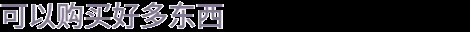
<style>
.page{position:relative;width:470px;height:32px;background:#000000}
.page>*{position:absolute;margin:0}
.t1{font:28px "WebPSD-18463539-0-Regular";color:#837a91;font-weight:bold}
</style>
<div class="page">
<p class="t1" style="left:0px;top:0px;width:470px;height:32px">可以购买好多东西</p>
</div>
